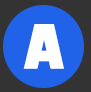
<style>
.page{position:relative;width:91px;height:92px;background:#2163e8}
.page>*{position:absolute;margin:0}
.t1{font:60px "GillSans-UltraBoldCondensed";letter-spacing:0.09em;color:#ffffff}
</style>
<div class="page">
<p class="t1" style="left:23px;top:24px;width:41px;height:45px">A</p>
</div>
